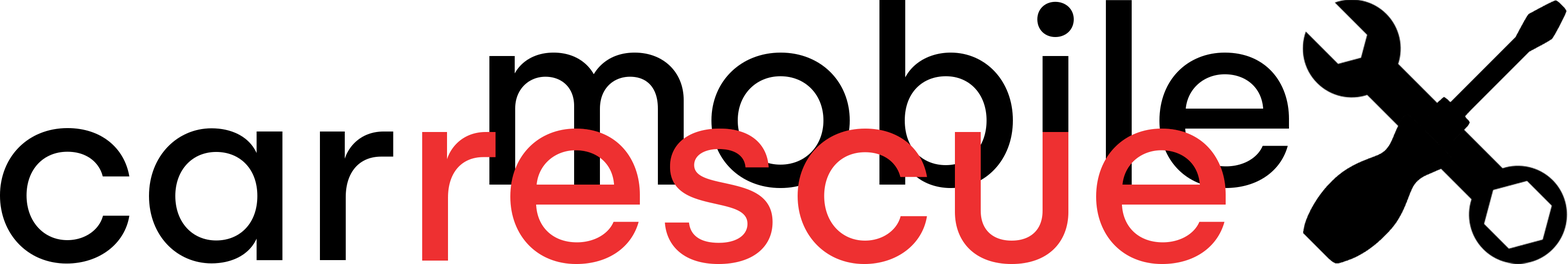
<style>
.page{position:relative;width:1568px;height:264px;background:#ffffff}
.page>*{position:absolute;margin:0}
.t1{font:245.9px "Alcyone-Medium";color:#000000}
.t2{font:245.9px "Alcyone-Medium";color:#ee3031}
</style>
<div class="page">
<p class="t1" style="left:489px;top:0px;width:800px;height:188px">mobile</p>
<p class="t1" style="left:0px;top:128px;width:393px;height:135px">car</p>
<p class="t2" style="left:422px;top:128px;width:804px;height:136px">rescue</p>
</div>
